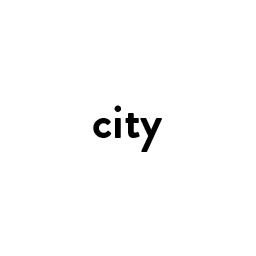
<style>
.page{position:relative;width:256px;height:256px;background:#ffffff}
.page>*{position:absolute;margin:0}
.t1{font:48px "BrandonGrotesque-Bold";color:#000000}
</style>
<div class="page">
<p class="t1" style="left:93px;top:105px;width:69px;height:47px">city</p>
</div>
